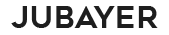
<style>
.page{position:relative;width:169px;height:35px;background:#ffffff}
.page>*{position:absolute;margin:0}
.t1{font:30px "Geometos";letter-spacing:0.02em;color:#1e1e1e}
</style>
<div class="page">
<p class="t1" style="left:11px;top:6px;width:147px;height:22px">Jubayer</p>
</div>
